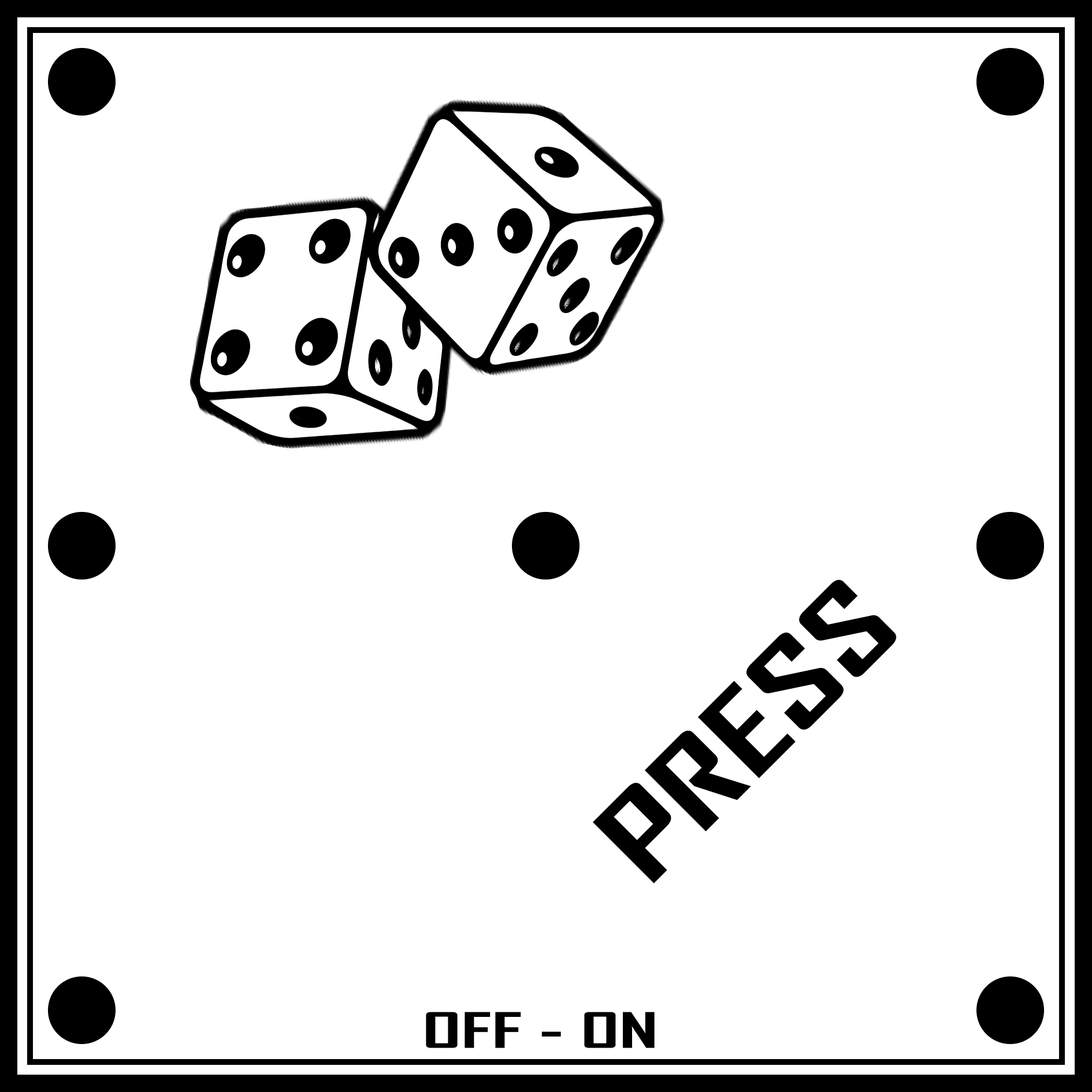
<style>
.page{position:relative;width:1092px;height:1092px;background:#ffffff}
.page>*{position:absolute;margin:0}
.t1{font:113.1px "AgencyFB-Bold";color:#000000;scale:1.44 1}
.t2{font:47px "AgencyFB-Bold";color:#000000;scale:1.73 1}
</style>
<div class="page">
<p class="t1" style="left:593px;top:580px;width:304px;height:303px;rotate:-45deg">PRESS</p>
<p class="t2" style="left:426px;top:1012px;width:229px;height:36px">OFF - ON</p>
</div>
